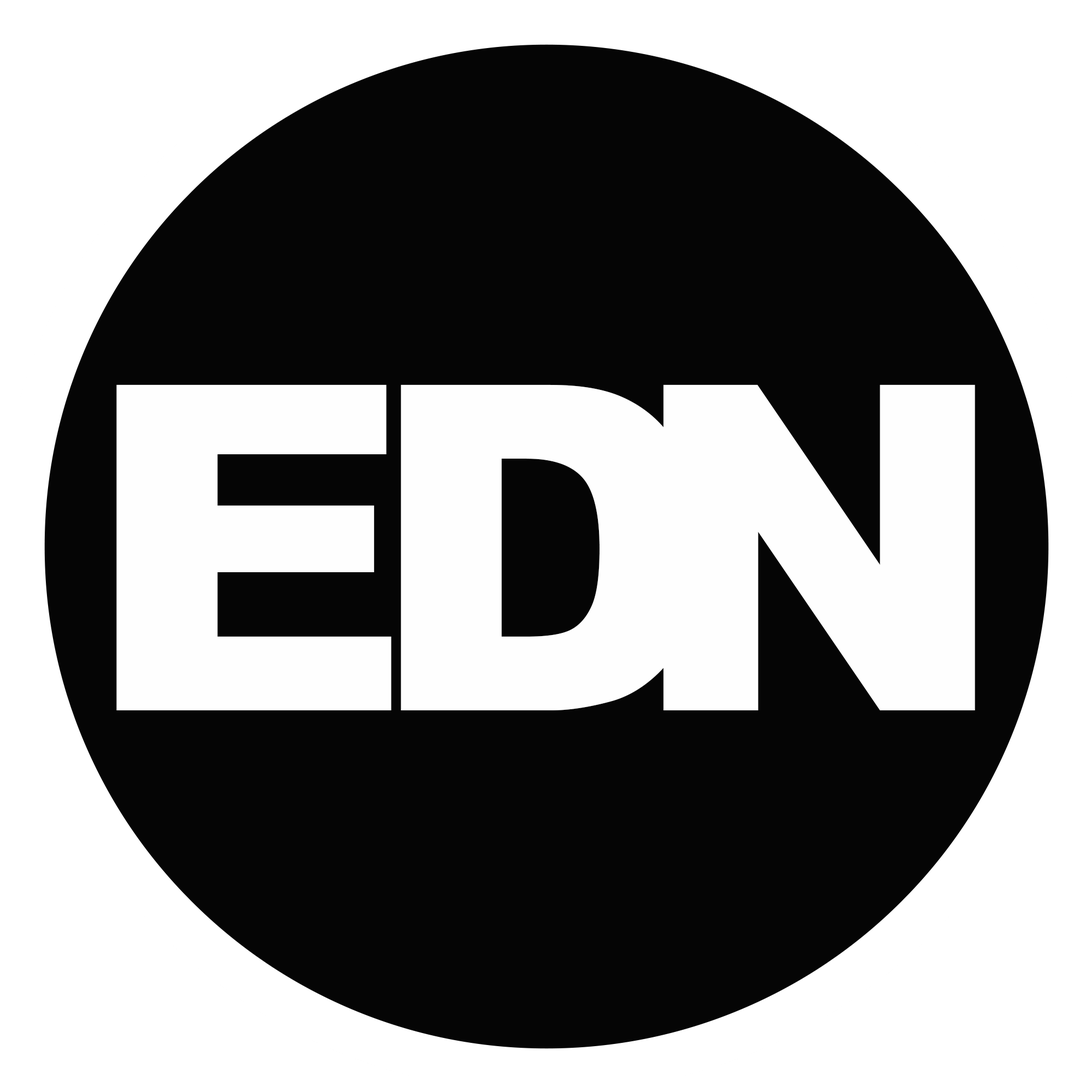
<style>
.page{position:relative;width:1092px;height:1092px;background:#050505}
.page>*{position:absolute;margin:0}
.t1{font:455px "Arial-Black";letter-spacing:-0.2em;color:#fefefe}
.t2{font:455px "Arial-Black";letter-spacing:-0.1em;color:#fefefe}
</style>
<div class="page">
<p class="t1" style="left:116px;top:384px;width:859px;height:326px"><span class="t2">E</span>DN</p>
</div>
